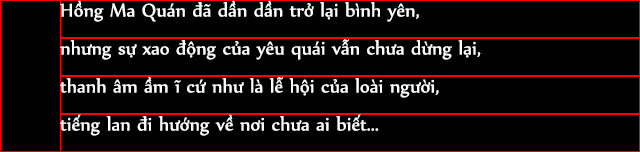
<style>
.page{position:relative;width:640px;height:152px;background:#000000}
.page>*{position:absolute;margin:0}
.t1{font:22px "UTM-Nyala";color:#ffffff}
</style>
<div class="page">
<p class="t1" style="left:60px;top:0px;width:359px;height:22px">Hồng Ma Quán đã dần dần trở lại bình yên,</p>
<p class="t1" style="left:60px;top:39px;width:421px;height:21px">nhưng sự xao động của yêu quái vẫn chưa dừng lại,</p>
<p class="t1" style="left:60px;top:76px;width:379px;height:22px">thanh âm ầm ĩ cứ như là lễ hội của loài người,</p>
<p class="t1" style="left:60px;top:114px;width:319px;height:22px">tiếng lan đi hướng về nơi chưa ai biết...</p>
</div>
